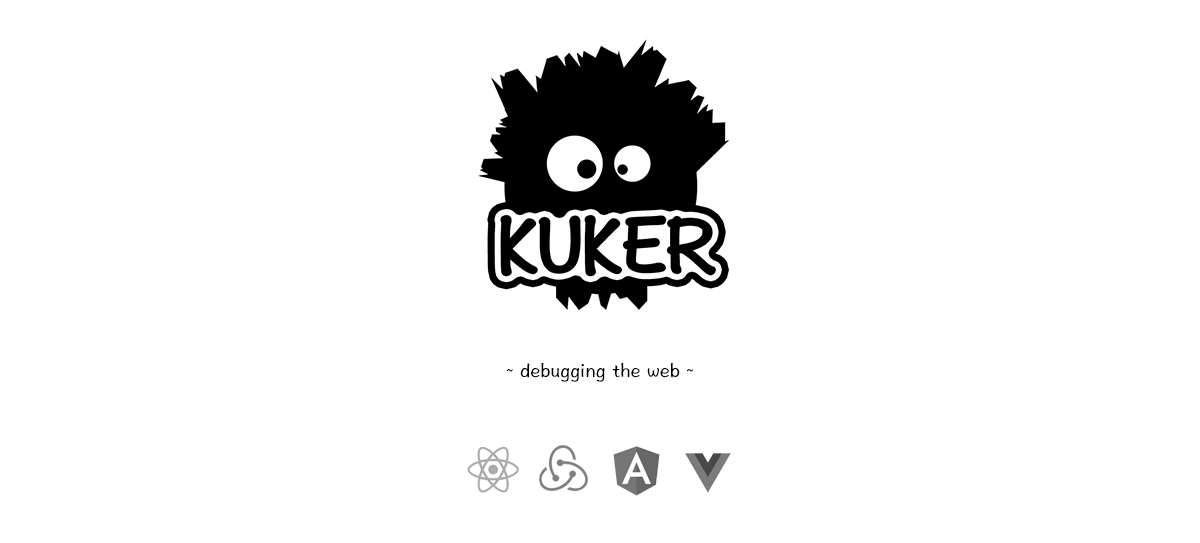
<style>
.page{position:relative;width:1200px;height:543px;background:#ffffff}
.page>*{position:absolute;margin:0}
.t1{font:20px "HannotateTC-W5";color:#000000}
</style>
<div class="page">
<p class="t1" style="left:506px;top:362px;width:188px;height:20px">~ debugging the web ~</p>
</div>
